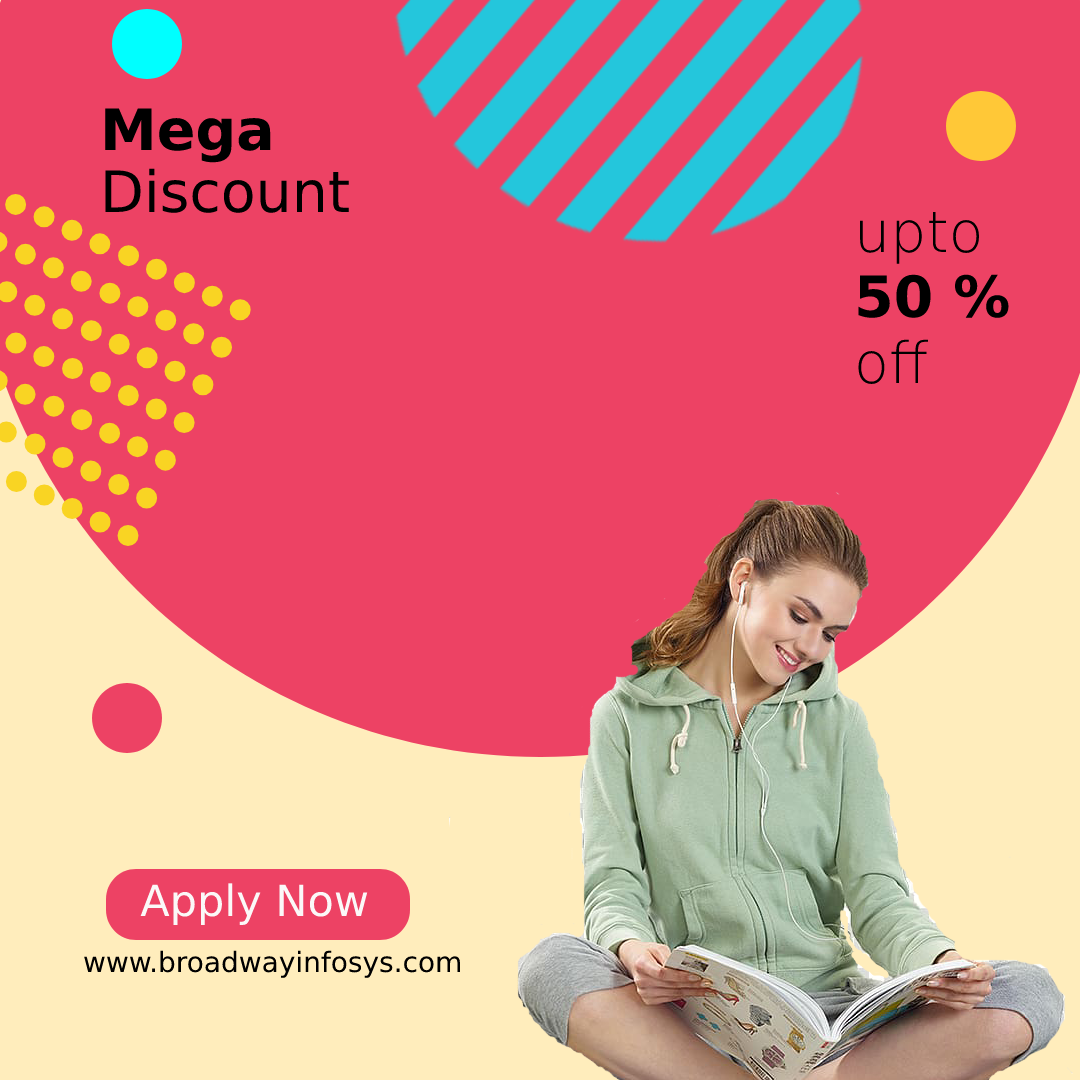
<style>
.page{position:relative;width:1080px;height:1080px;background:#ed4264}
.page>*{position:absolute;margin:0}
.t1{font:57px "DejaVuSans";color:#000000}
.t2{font:57px "DejaVuSans-Bold";color:#000000}
.t3{font:57px "DejaVuSans-ExtraLight";color:#000000}
.t4{font:43px "DejaVuSans";color:#fbf8f8}
.t5{font:28px "DejaVuSans";color:#000000}
</style>
<div class="page">
<p class="t1" style="left:105px;top:108px;width:244px;height:105px"><span class="t2">Mega <br></span>Discount</p>
<p class="t3" style="left:858px;top:211px;width:151px;height:173px">upto<br><span class="t2">50 %<br></span>off</p>
<p class="t4" style="left:140px;top:883px;width:228px;height:42px">Apply Now</p>
<p class="t5" style="left:84px;top:950px;width:376px;height:28px">www.broadwayinfosys.com</p>
</div>
